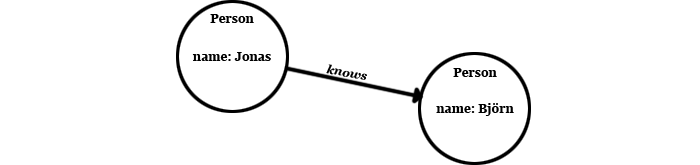
<style>
.page{position:relative;width:700px;height:165px;background:#ffffff}
.page>*{position:absolute;margin:0}
.t1{font:12px "Georgia-Bold";color:#000000}
.t2{font:12px "Georgia-BoldItalic";color:#000000}
</style>
<div class="page">
<p class="t1" style="left:210px;top:14px;width:44px;height:9px">Person</p>
<p class="t1" style="left:192px;top:52px;width:79px;height:9px">name: Jonas</p>
<p class="t2" style="left:326px;top:64px;width:41px;height:16px;rotate:11deg">knows</p>
<p class="t1" style="left:453px;top:68px;width:44px;height:9px">Person</p>
<p class="t1" style="left:436px;top:103px;width:78px;height:13px">name: Björn</p>
</div>
